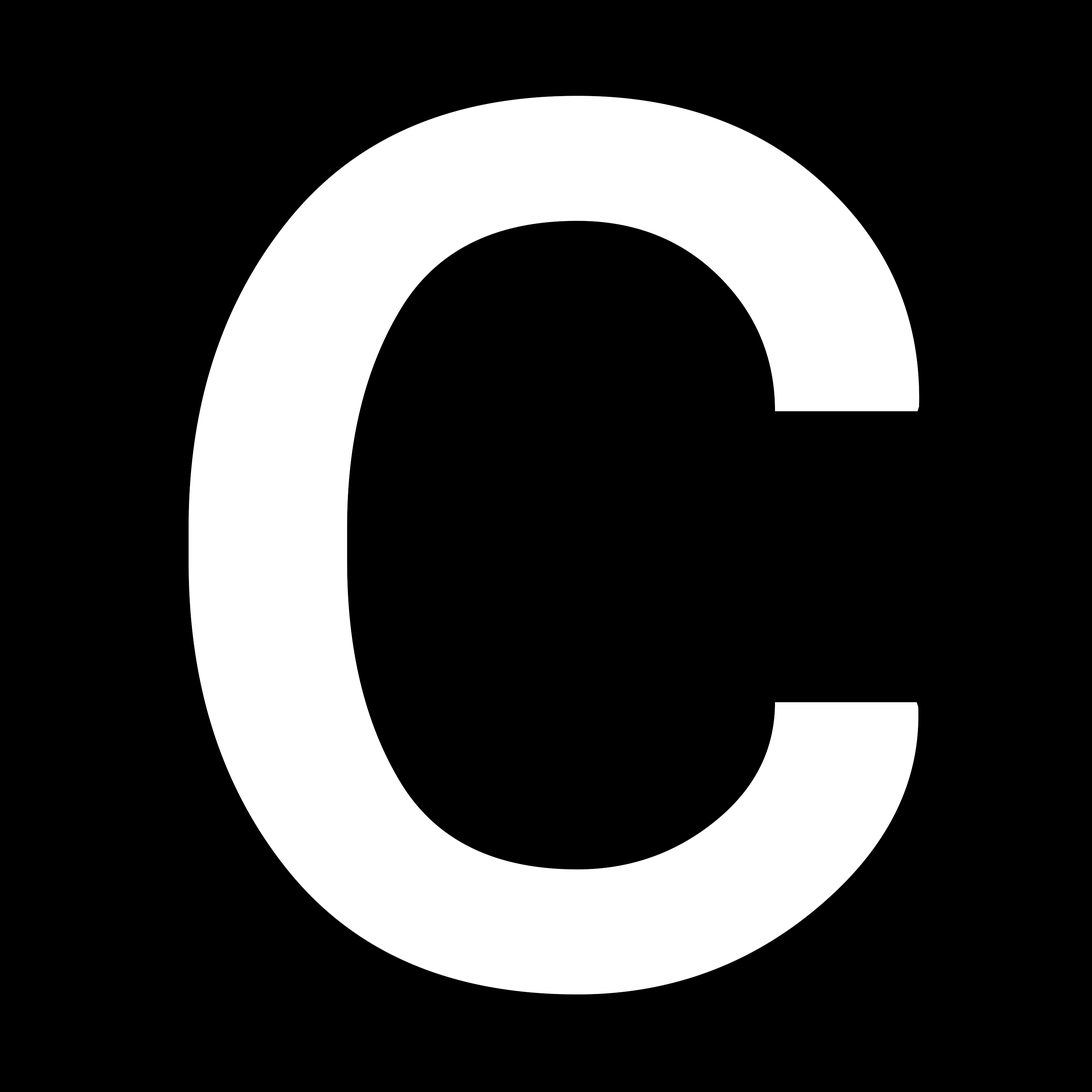
<style>
.page{position:relative;width:1092px;height:1092px;background:#000000}
.page>*{position:absolute;margin:0}
.t1{font:1638.4px "Roboto-Regular";color:#ffffff}
</style>
<div class="page">
<p class="t1" style="left:189px;top:96px;width:730px;height:898px">c</p>
</div>
